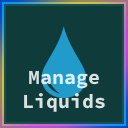
<style>
.page{position:relative;width:128px;height:128px;background:#0f3b3a}
.page>*{position:absolute;margin:0}
.t1{font:20px "SourceCodePro-Bold";color:#dbe2e2}
</style>
<div class="page">
<p class="t1" style="left:24px;top:70px;width:81px;height:42px;text-align:center">Manage<br>Liquids</p>
</div>
